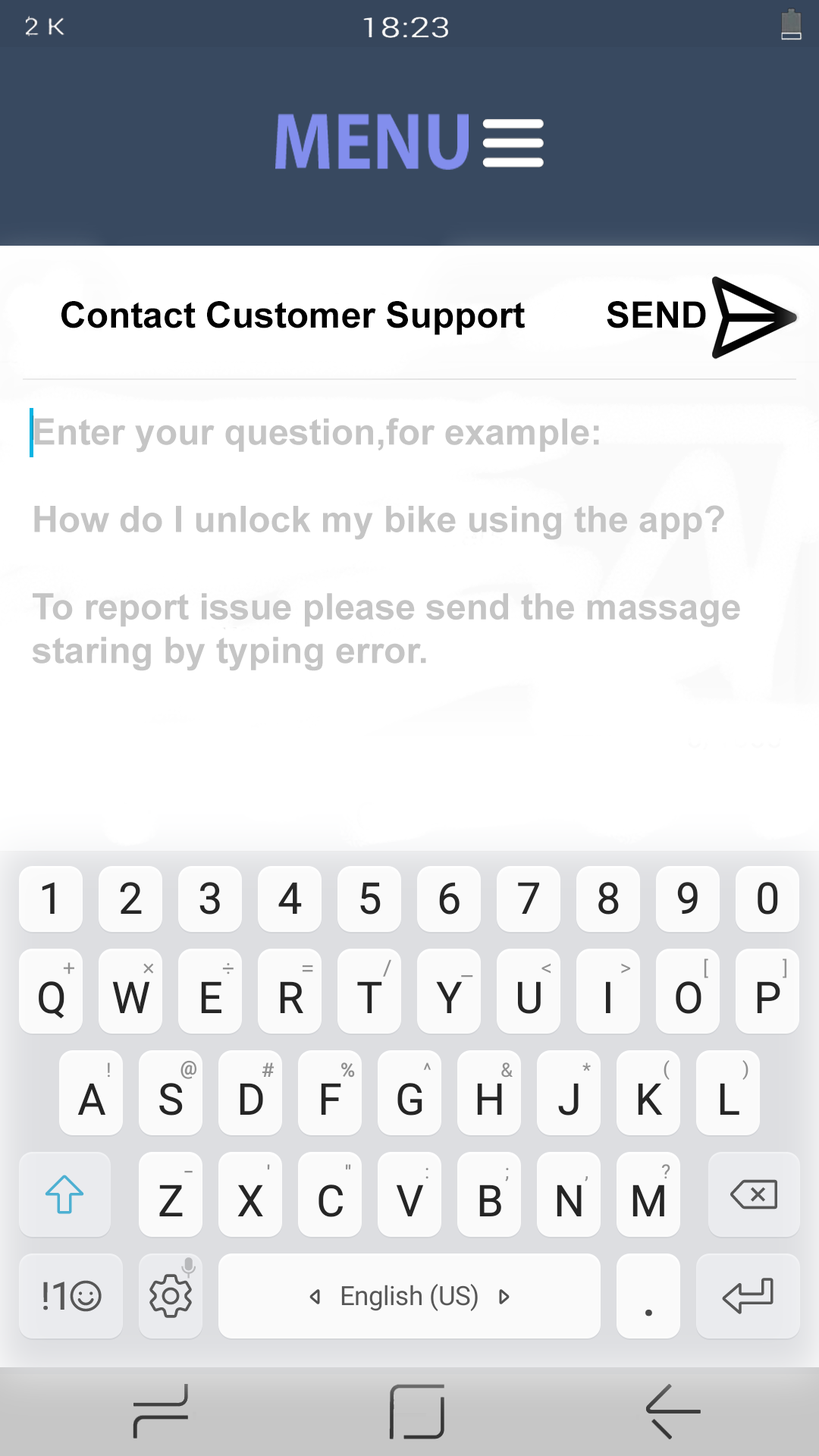
<style>
.page{position:relative;width:819px;height:1456px;background:#ffffff}
.page>*{position:absolute;margin:0}
.t1{font:36.4px "Arial-BoldMT";color:#000000}
.t2{font:36.4px "Arial-BoldMT";color:#c5c5c5}
</style>
<div class="page">
<p class="t1" style="left:61px;top:301px;width:645px;height:34px">Contact Customer Support        SEND</p>
<p class="t2" style="left:32px;top:418px;width:708px;height:253px">Enter your question,for example:<br><br>How do I unlock my bike using the app?<br><br>To report issue please send the massage staring by typing error.</p>
</div>
